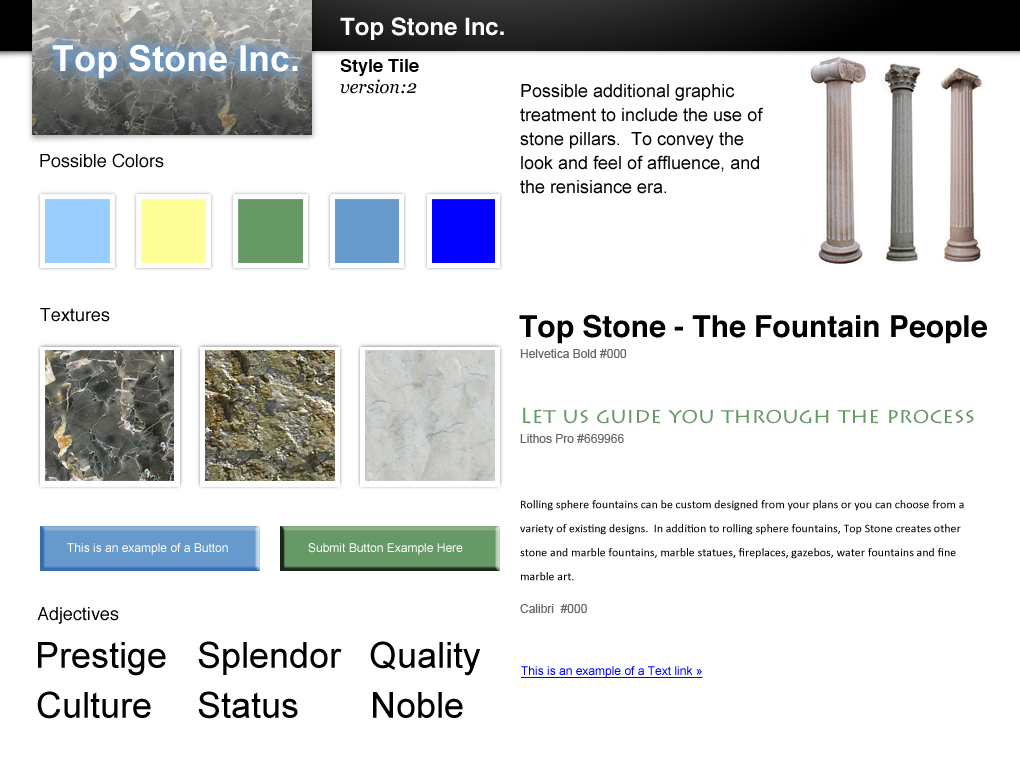
<style>
.page{position:relative;width:1020px;height:760px;background:#ffffff}
.page>*{position:absolute;margin:0}
.t1{font:24px "Helvetica-Bold";color:#ffffff}
.t2{font:36px "Arial-BoldMT";color:#ffffff}
.t3{font:18px "Helvetica-Bold";color:#000000}
.t4{font:18px "Georgia-Italic";color:#000000}
.t5{font:18px/24px "ArialMT";color:#000000}
.t6{font:18px "Helvetica";color:#000000}
.t7{font:30px "Helvetica-Bold";color:#000000}
.t8{font:12px "ArialMT";color:#666666}
.t9{font:22px "LithosPro-Regular";color:#669966}
.t10{font:12px/24px "Calibri";color:#000000}
.t11{font:12px "ArialMT";color:#ffffff}
.t12{font:36px "ArialMT";color:#000000}
.t13{font:12px "ArialMT";color:#0000ff;text-decoration:underline}
</style>
<div class="page">
<p class="t1" style="left:340px;top:17px;width:164px;height:23px">Top Stone Inc.</p>
<p class="t2" style="left:52px;top:44px;width:246px;height:35px">Top Stone Inc.</p>
<p class="t3" style="left:340px;top:59px;width:79px;height:17px">Style Tile</p>
<p class="t4" style="left:340px;top:79px;width:77px;height:15px">version:2</p>
<p class="t5" style="left:520px;top:84px;width:243px;height:110px">Possible additional graphic treatment to include the use of stone pillars.  To convey the look and feel of affluence, and the renisiance era.</p>
<p class="t6" style="left:40px;top:153px;width:124px;height:15px">Possible Colors</p>
<p class="t6" style="left:40px;top:308px;width:70px;height:14px">Textures</p>
<p class="t7" style="left:519px;top:314px;width:468px;height:30px">Top Stone - The Fountain People</p>
<p class="t8" style="left:520px;top:349px;width:107px;height:9px">Helvetica Bold #000</p>
<p class="t9" style="left:523px;top:407px;width:451px;height:17px">Let us guide you through the process</p>
<p class="t8" style="left:520px;top:434px;width:104px;height:9px">Lithos Pro #669966</p>
<p class="t10" style="left:520px;top:500px;width:444px;height:81px">Rolling sphere fountains can be custom designed from your plans or you can choose from a variety of existing designs.  In addition to rolling sphere fountains, Top Stone creates other stone and marble fountains, marble statues, fireplaces, gazebos, water fountains and fine marble art.</p>
<p class="t11" style="left:67px;top:543px;width:161px;height:12px">This is an example of a Button</p>
<p class="t11" style="left:308px;top:543px;width:155px;height:12px">Submit Button Example Here</p>
<p class="t8" style="left:520px;top:604px;width:67px;height:9px">Calibri  #000</p>
<p class="t6" style="left:37px;top:607px;width:82px;height:17px">Adjectives</p>
<p class="t12" style="left:198px;top:641px;width:144px;height:34px">Splendor</p>
<p class="t12" style="left:370px;top:641px;width:111px;height:35px">Quality</p>
<p class="t12" style="left:38px;top:642px;width:128px;height:34px">Prestige</p>
<p class="t13" style="left:521px;top:666px;width:182px;height:12px">This is an example of a Text link »</p>
<p class="t12" style="left:37px;top:691px;width:114px;height:28px">Culture</p>
<p class="t12" style="left:198px;top:691px;width:100px;height:28px">Status</p>
<p class="t12" style="left:373px;top:692px;width:90px;height:26px">Noble</p>
</div>
